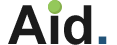
<style>
.page{position:relative;width:117px;height:45px;background:#ffffff}
.page>*{position:absolute;margin:0}
.t1{font:54px "Arial-BoldMT";color:#1b1b1b}
.t2{font:54px "Arial-BoldMT";color:#225378}
</style>
<div class="page">
<p class="t1" style="left:8px;top:5px;width:99px;height:40px">Aid<span class="t2">.</span></p>
</div>
